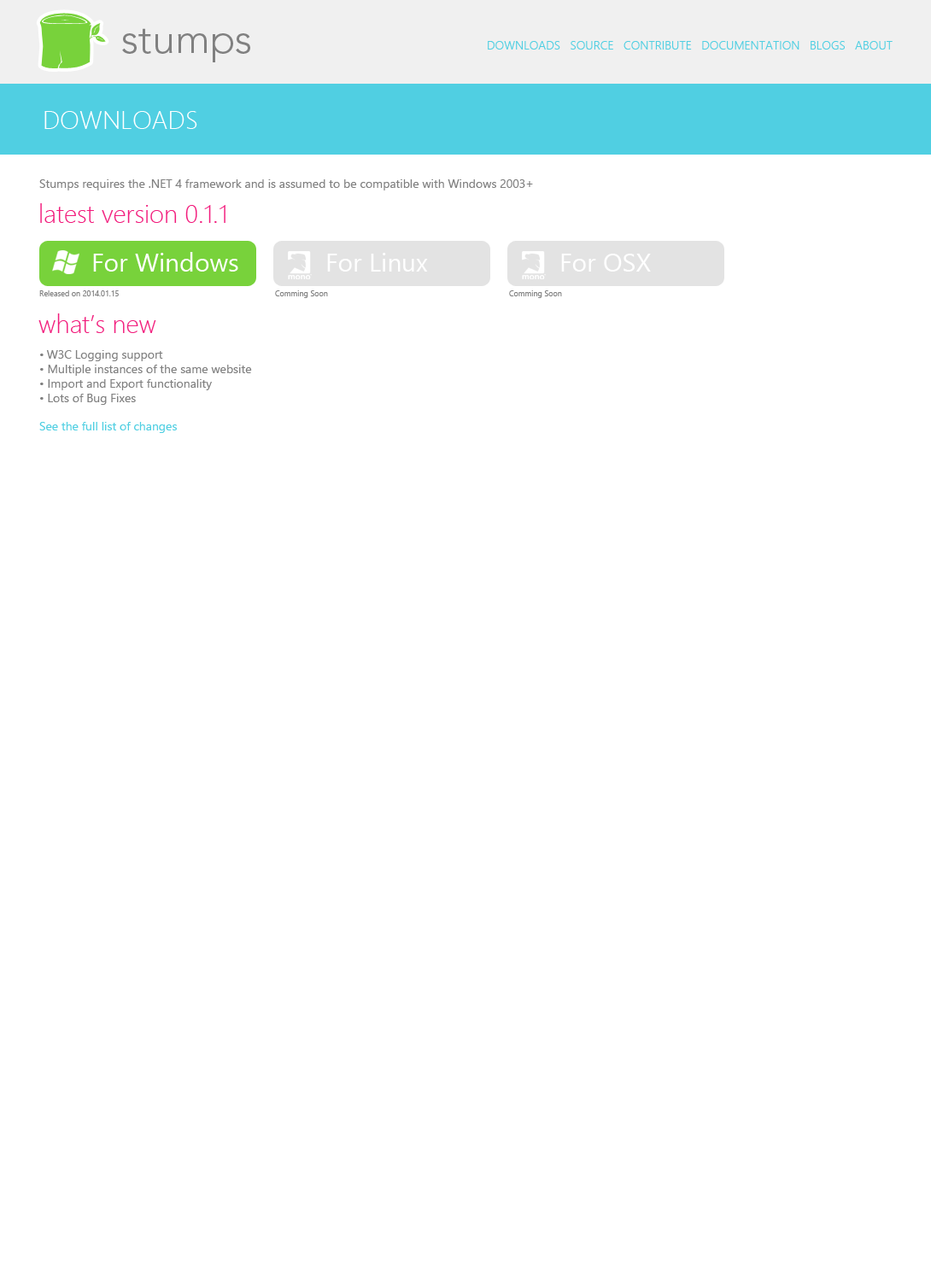
<style>
.page{position:relative;width:931px;height:1281px;background:#ffffff}
.page>*{position:absolute;margin:0}
.t1{font:41px "Avenir-Light";color:#808080}
.t2{font:12px "SegoeUI-Semilight";color:#50cfe2}
.t3{font:25.6px "SegoeUI-Light";color:#ffffff}
.t4{font:12px "SegoeUI";color:#808080}
.t5{font:25.6px "SegoeUI-Light";color:#f21c7c}
.t6{font:25.6px "SegoeUI";color:#ffffff}
.t7{font:7.7px "SegoeUI";color:#808080}
.t8{font:12px "SegoeUI";color:#50cfe2}
</style>
<div class="page">
<p class="t1" style="left:122px;top:28px;width:128px;height:34px">stumps</p>
<p class="t2" style="left:488px;top:41px;width:404px;height:9px">DOWNLOADS   SOURCE   CONTRIBUTE   DOCUMENTATION   BLOGS   ABOUT</p>
<p class="t3" style="left:44px;top:111px;width:153px;height:18px">DOWNLOADS</p>
<p class="t4" style="left:39px;top:179px;width:494px;height:11px">Stumps requires the .NET 4 framework and is assumed to be compatible with Windows 2003+</p>
<p class="t5" style="left:40px;top:203px;width:185px;height:20px">latest version 0.1.1</p>
<p class="t6" style="left:93px;top:252px;width:145px;height:20px">For Windows</p>
<p class="t6" style="left:327px;top:253px;width:101px;height:19px">For Linux</p>
<p class="t6" style="left:561px;top:254px;width:90px;height:18px">For OSX</p>
<p class="t7" style="left:39px;top:290px;width:80px;height:6px">Released on 2014.01.15</p>
<p class="t7" style="left:275px;top:290px;width:53px;height:8px">Comming Soon</p>
<p class="t7" style="left:509px;top:290px;width:53px;height:8px">Comming Soon</p>
<p class="t5" style="left:38px;top:313px;width:118px;height:20px">what’s new</p>
<p class="t4" style="left:39px;top:350px;width:213px;height:83px">• W3C Logging support<br>• Multiple instances of the same website<br>• Import and Export functionality<br>• Lots of Bug Fixes<br><br><span class="t8">See the full list of changes</span></p>
</div>
